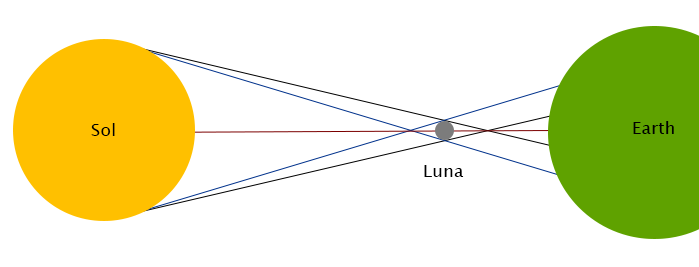
<style>
.page{position:relative;width:699px;height:267px;background:#ffffff}
.page>*{position:absolute;margin:0}
.t1{font:30px "LucidaSansUnicode";color:#000000}
</style>
<div class="page">
<p class="t1" style="left:91px;top:123px;width:24px;height:13px">Sol</p>
<p class="t1" style="left:633px;top:121px;width:41px;height:13px">Earth</p>
<p class="t1" style="left:424px;top:165px;width:40px;height:12px">Luna</p>
</div>
